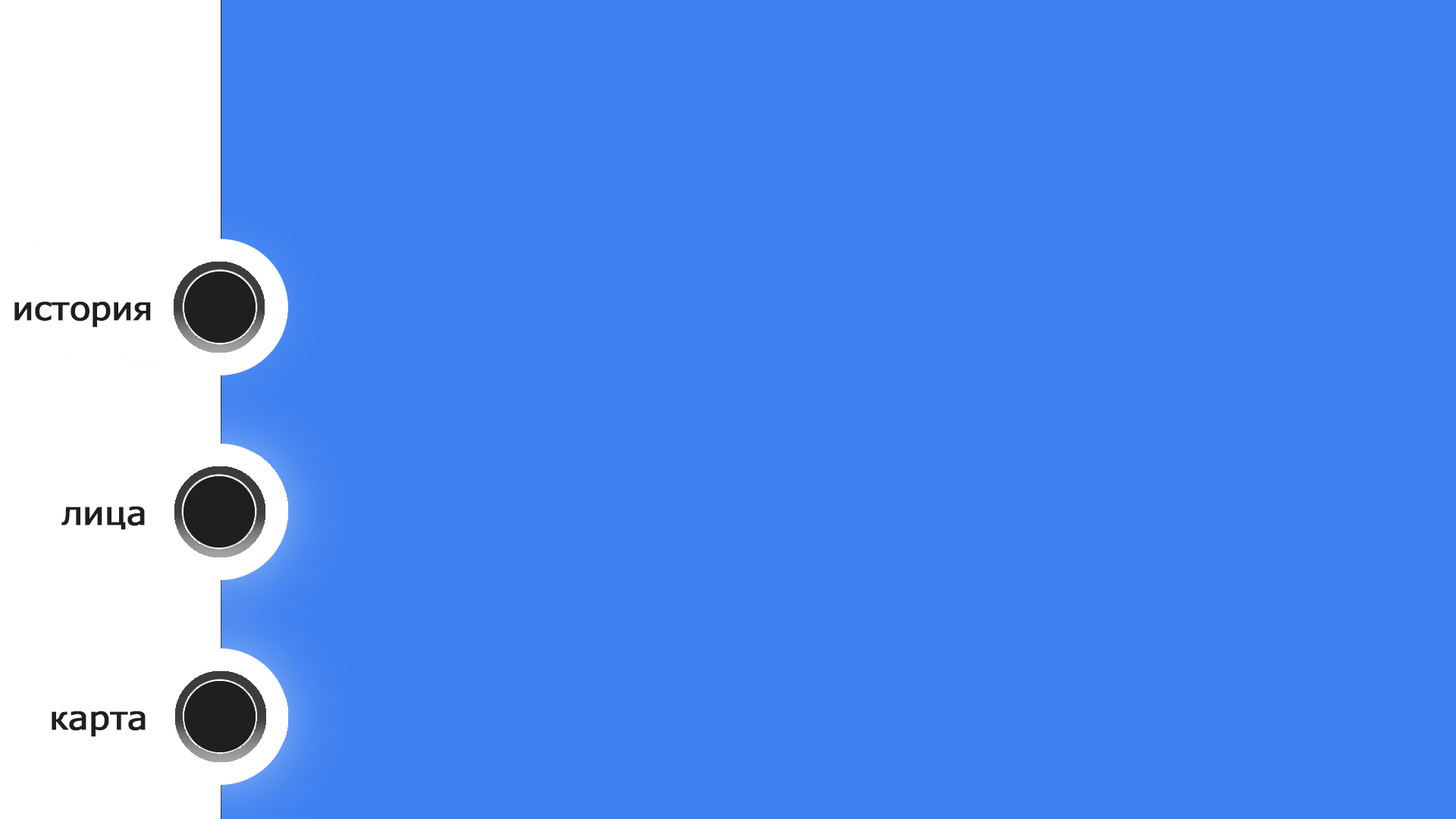
<style>
.page{position:relative;width:1456px;height:819px;background:#3c80f0}
.page>*{position:absolute;margin:0}
.t1{font:32.8px "Tahoma";color:#1f1f1f;font-weight:bold;scale:1.11 1}
</style>
<div class="page">
<p class="t1" style="left:14px;top:301px;width:137px;height:27px">история</p>
<p class="t1" style="left:61px;top:506px;width:84px;height:24px">лица</p>
<p class="t1" style="left:52px;top:711px;width:94px;height:26px">карта</p>
</div>
